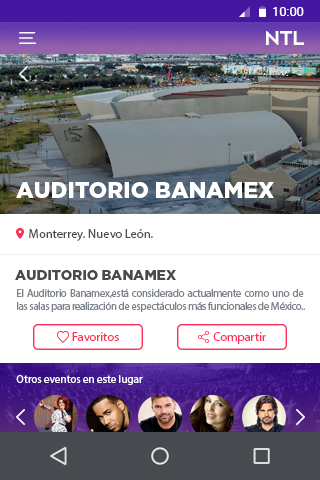
<style>
.page{position:relative;width:320px;height:480px;background:#ffffff}
.page>*{position:absolute;margin:0}
.t1{font:12.5px "Roboto-Regular";color:#ffffff}
.t2{font:22.2px "GothamHTF-Black";color:#ffffff;text-transform:uppercase}
.t3{font:12.5px "MyriadPro-Regular";color:#474a4f}
.t4{font:13.9px "GothamHTF-Black";color:#474a4f;text-transform:uppercase}
.t5{font:11.1px "MyriadPro-Regular";letter-spacing:-0.04em;color:#7e848c}
.t6{font:12.5px "MyriadPro-Regular";color:#ff2d55}
.t7{font:11.1px "MyriadPro-Regular";color:#fafcff}
</style>
<div class="page">
<p class="t1" style="left:273px;top:7px;width:31px;height:9px">10:00</p>
<p class="t2" style="left:16px;top:182px;width:258px;height:16px">auditorio banamex</p>
<p class="t3" style="left:29px;top:229px;width:124px;height:12px">Monterrey. Nuevo León.</p>
<p class="t4" style="left:15px;top:270px;width:161px;height:10px">auditorio banamex</p>
<p class="t5" style="left:17px;top:289px;width:288px;height:23px;text-align:justify">El Auditorio Banamex,está considerado actualmente como uno de las salas para realización de espectáculos más funcionales de México..</p>
<p class="t6" style="left:72px;top:332px;width:47px;height:9px">Favoritos</p>
<p class="t6" style="left:213px;top:332px;width:53px;height:12px">Compartir</p>
<p class="t7" style="left:16px;top:375px;width:127px;height:10px">Otros eventos en este lugar</p>
</div>
